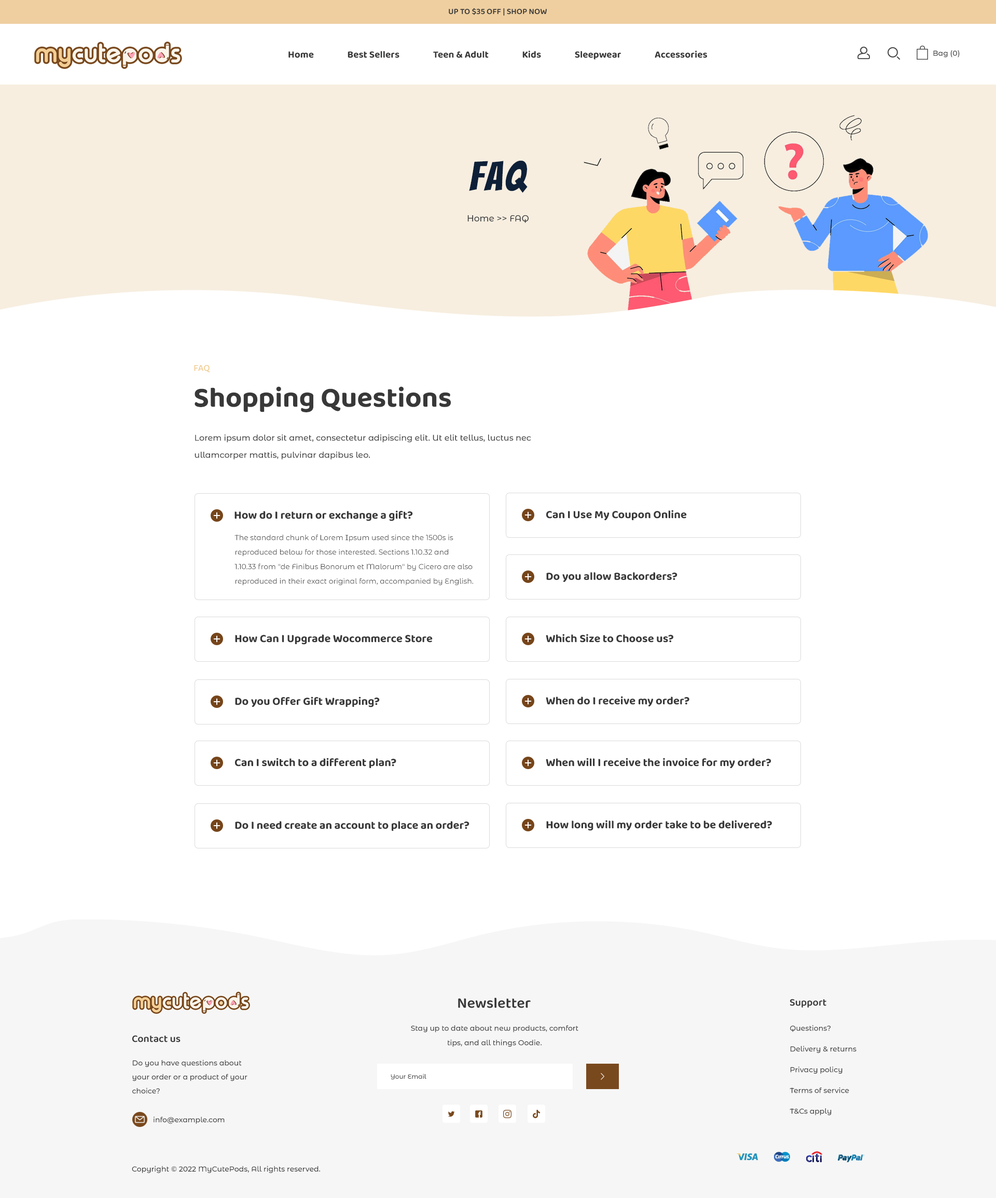
<style>
.page{position:relative;width:996px;height:1198px;background:#ffffff}
.page>*{position:absolute;margin:0}
.t1{font:8.3px "Baloo2-SemiBold";color:#383838}
.t2{font:9.9px "Baloo2-Bold";color:#393838}
.t3{font:7.3px "MontserratAlternates-Medium";color:#383838}
.t4{font:40.4px "Bangers-Regular";letter-spacing:0.06em;color:#0e2037}
.t5{font:8.8px "MontserratAlternates-Medium";color:#3d3d3d}
.t6{font:9.3px "Baloo2-Medium";color:#f2cd93}
.t7{font:28.5px "Baloo2-Bold";color:#383838}
.t8{font:8.3px/17.1px "MontserratAlternates-Medium";color:#3d3d3d}
.t9{font:11.4px "Baloo2-Bold";color:#383838}
.t10{font:7.3px/14.5px "MontserratAlternates-Regular";color:#3d3d3d}
.t11{font:15px "Baloo2-SemiBold";color:#383838}
.t12{font:10.4px "Baloo2-SemiBold";color:#383838}
.t13{font:7.3px/14.5px "MontserratAlternates-Medium";color:#3d3d3d}
.t14{font:7.3px/20.7px "MontserratAlternates-Medium";color:#3d3d3d}
.t15{font:7.3px/14px "MontserratAlternates-Medium";color:#3d3d3d}
.t16{font:6.2px "MontserratAlternates-Medium";color:#3d3d3d}
.t17{font:7.3px "MontserratAlternates-Medium";color:#3d3d3d}
</style>
<div class="page">
<p class="t1" style="left:449px;top:8px;width:98px;height:8px">UP TO $35 OFF | SHOP NOW</p>
<p class="t2" style="left:288px;top:50px;width:419px;height:10px">Home                 Best Sellers                 Teen &amp; Adult                 Kids                 Sleepwear                 Accessories</p>
<p class="t3" style="left:933px;top:50px;width:26px;height:8px">Bag (0)</p>
<p class="t4" style="left:469px;top:160px;width:58px;height:33px">FAQ</p>
<p class="t5" style="left:467px;top:215px;width:61px;height:8px">Home &gt;&gt; FAQ</p>
<p class="t6" style="left:194px;top:365px;width:16px;height:7px">FAQ</p>
<p class="t7" style="left:194px;top:386px;width:257px;height:26px">Shopping Questions</p>
<p class="t8" style="left:194px;top:434px;width:337px;height:25px">Lorem ipsum dolor sit amet, consectetur adipiscing elit. Ut elit tellus, luctus nec ullamcorper mattis, pulvinar dapibus leo.</p>
<p class="t9" style="left:546px;top:510px;width:141px;height:11px">Can I Use My Coupon Online</p>
<p class="t9" style="left:234px;top:510px;width:179px;height:11px">How do I return or exchange a gift?</p>
<p class="t10" style="left:234px;top:535px;width:239px;height:50px">The standard chunk of Lorem Ipsum used since the 1500s is reproduced below for those interested. Sections 1.10.32 and 1.10.33 from "de Finibus Bonorum et Malorum" by Cicero are also reproduced in their exact original form, accompanied by English.</p>
<p class="t9" style="left:546px;top:572px;width:131px;height:10px">Do you allow Backorders?</p>
<p class="t9" style="left:235px;top:634px;width:197px;height:11px">How Can I Upgrade Wocommerce Store</p>
<p class="t9" style="left:545px;top:634px;width:128px;height:8px">Which Size to Choose us?</p>
<p class="t9" style="left:235px;top:696px;width:145px;height:11px">Do you Offer Gift Wrapping?</p>
<p class="t9" style="left:545px;top:696px;width:144px;height:11px">When do I receive my order?</p>
<p class="t9" style="left:235px;top:758px;width:161px;height:10px">Can I switch to a different plan?</p>
<p class="t9" style="left:545px;top:758px;width:226px;height:10px">When will I receive the invoice for my order?</p>
<p class="t9" style="left:235px;top:821px;width:234px;height:10px">Do I need create an account to place an order?</p>
<p class="t9" style="left:546px;top:820px;width:226px;height:11px">How long will my order take to be delivered?</p>
<p class="t11" style="left:458px;top:998px;width:72px;height:10px">Newsletter</p>
<p class="t12" style="left:790px;top:999px;width:36px;height:8px">Support</p>
<p class="t13" style="left:411px;top:1025px;width:167px;height:22px;text-align:center">Stay up to date about new products, comfort tips, and all things Oodie.</p>
<p class="t14" style="left:789px;top:1025px;width:67px;height:90px">Questions?<br>Delivery &amp; returns<br>Privacy policy<br>Terms of service<br>T&amp;Cs apply</p>
<p class="t12" style="left:132px;top:1035px;width:48px;height:7px">Contact us</p>
<p class="t15" style="left:132px;top:1059px;width:115px;height:35px">Do you have questions about<br>your order or a product of your<br>choice?</p>
<p class="t16" style="left:390px;top:1073px;width:36px;height:7px">Your Email</p>
<p class="t17" style="left:153px;top:1116px;width:72px;height:8px">info@example.com</p>
<p class="t3" style="left:132px;top:1166px;width:188px;height:7px">Copyright © 2022 MyCutePods, All rights reserved.</p>
</div>
